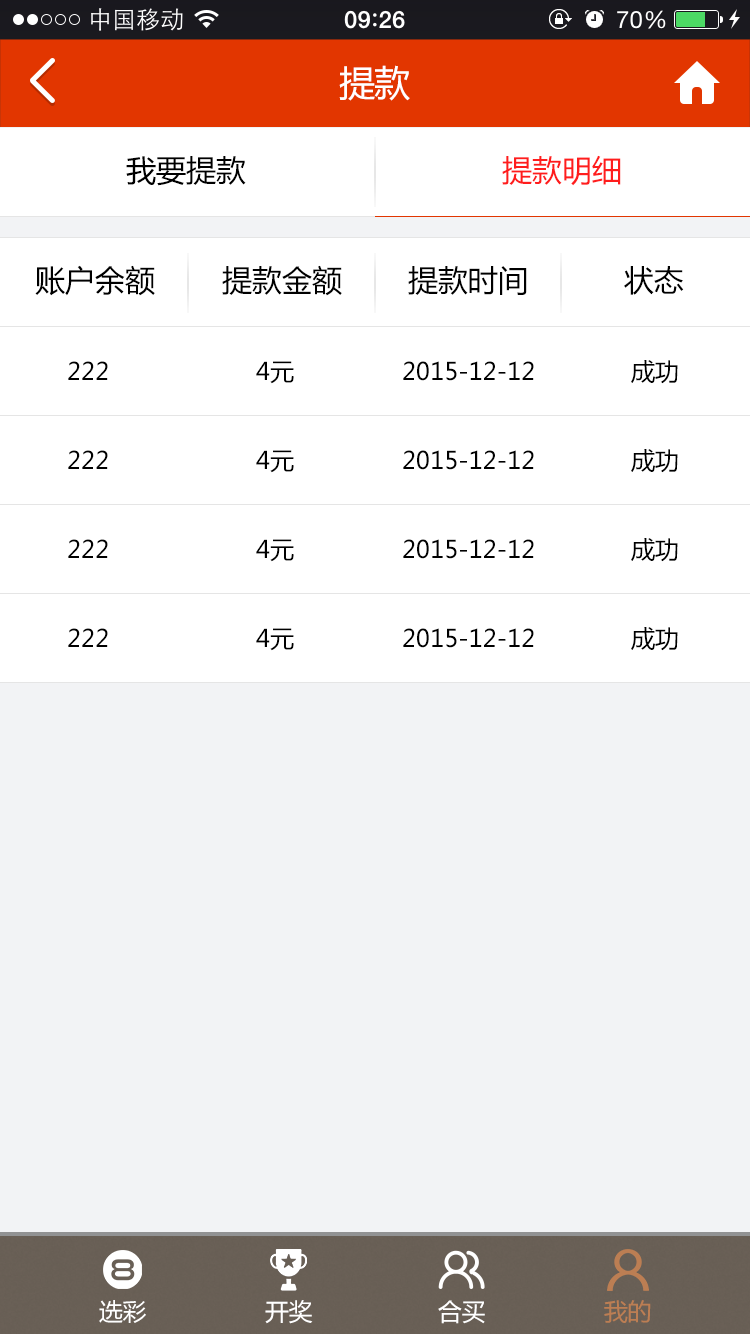
<style>
.page{position:relative;width:750px;height:1334px;background:#f2f3f5}
.page>*{position:absolute;margin:0}
.t1{font:36px "MicrosoftYaHei";letter-spacing:-0.025em;color:#ffffff}
.t2{font:30px "MicrosoftYaHei";color:#000000}
.t3{font:30px "MicrosoftYaHei";color:#ff1d1d}
.t4{font:24px "MicrosoftYaHei";color:#000000}
.t5{font:24px "MicrosoftYaHei";letter-spacing:-0.025em;color:#ffffff}
.t6{font:24px "MicrosoftYaHei";letter-spacing:-0.025em;color:#bc7e53}
</style>
<div class="page">
<p class="t1" style="left:339px;top:65px;width:71px;height:36px">提款</p>
<p class="t2" style="left:126px;top:156px;width:120px;height:30px">我要提款</p>
<p class="t3" style="left:502px;top:155px;width:119px;height:31px">提款明细</p>
<p class="t2" style="left:35px;top:265px;width:120px;height:31px">账户余额</p>
<p class="t2" style="left:222px;top:265px;width:120px;height:31px">提款金额</p>
<p class="t2" style="left:408px;top:266px;width:119px;height:29px">提款时间</p>
<p class="t2" style="left:624px;top:266px;width:60px;height:29px">状态</p>
<p class="t4" style="left:68px;top:361px;width:40px;height:19px">222</p>
<p class="t4" style="left:256px;top:361px;width:38px;height:23px">4元</p>
<p class="t4" style="left:403px;top:361px;width:131px;height:20px">2015-12-12</p>
<p class="t4" style="left:631px;top:360px;width:47px;height:24px">成功</p>
<p class="t4" style="left:631px;top:449px;width:47px;height:24px">成功</p>
<p class="t4" style="left:68px;top:450px;width:40px;height:19px">222</p>
<p class="t4" style="left:256px;top:450px;width:38px;height:23px">4元</p>
<p class="t4" style="left:403px;top:450px;width:131px;height:20px">2015-12-12</p>
<p class="t4" style="left:68px;top:539px;width:40px;height:19px">222</p>
<p class="t4" style="left:256px;top:539px;width:38px;height:23px">4元</p>
<p class="t4" style="left:403px;top:539px;width:131px;height:20px">2015-12-12</p>
<p class="t4" style="left:631px;top:538px;width:47px;height:24px">成功</p>
<p class="t4" style="left:68px;top:628px;width:40px;height:19px">222</p>
<p class="t4" style="left:256px;top:628px;width:38px;height:23px">4元</p>
<p class="t4" style="left:403px;top:628px;width:131px;height:20px">2015-12-12</p>
<p class="t4" style="left:631px;top:627px;width:47px;height:24px">成功</p>
<p class="t5" style="left:99px;top:1300px;width:47px;height:23px">选彩</p>
<p class="t5" style="left:265px;top:1300px;width:48px;height:24px">开奖</p>
<p class="t5" style="left:438px;top:1300px;width:47px;height:24px">合买</p>
<p class="t6" style="left:604px;top:1300px;width:47px;height:23px">我的</p>
</div>
